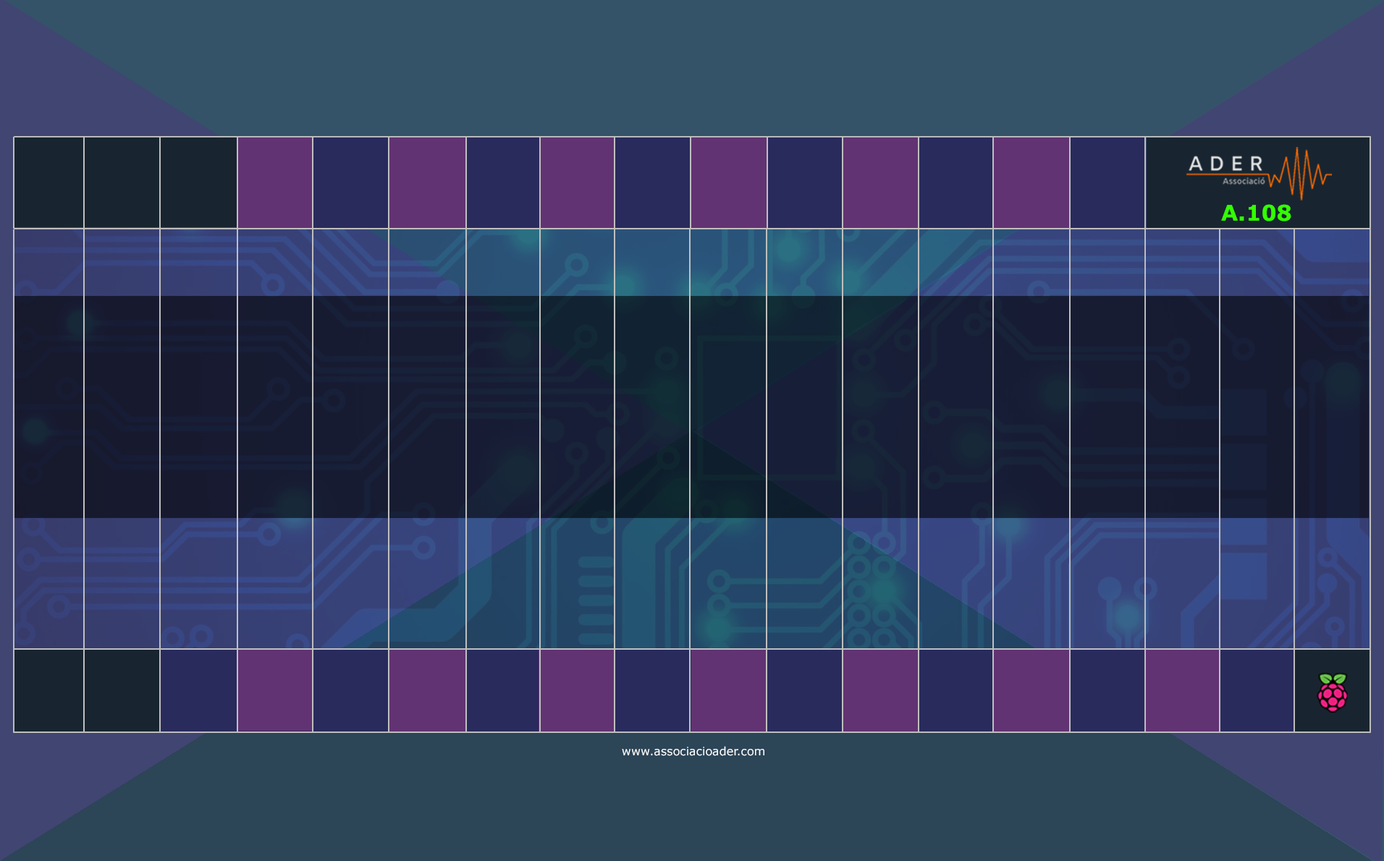
<style>
.page{position:relative;width:1384px;height:861px}
.page>*{position:absolute;margin:0}
.t1{font:21.7px "Verdana-Bold";color:#33ff00}
.t2{font:11.6px "Verdana";color:#ffffff}
</style>
<div class="page">
<p class="t1" style="left:1221px;top:204px;width:70px;height:18px">A.108</p>
<p class="t2" style="left:622px;top:746px;width:142px;height:11px">www.associacioader.com</p>
</div>
